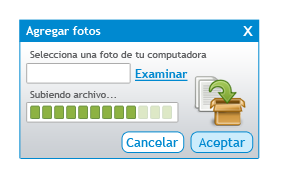
<style>
.page{position:relative;width:283px;height:182px;background:#ffffff}
.page>*{position:absolute;margin:0}
.t1{font:12px "TrebuchetMS-Bold";color:#ffffff}
.t2{font:20px "TrebuchetMS";color:#ffffff}
.t3{font:10px "TrebuchetMS";color:#626365}
.t4{font:12px "TrebuchetMS-Bold";color:#0089d0;text-decoration:underline}
.t5{font:13.3px "TrebuchetMS";color:#0089d0}
</style>
<div class="page">
<p class="t1" style="left:26px;top:26px;width:75px;height:11px">Agregar fotos</p>
<p class="t2" style="left:243px;top:26px;width:10px;height:10px">x</p>
<p class="t3" style="left:30px;top:51px;width:177px;height:9px">Selecciona una foto de tu computadora</p>
<p class="t4" style="left:135px;top:69px;width:53px;height:12px">Examinar</p>
<p class="t3" style="left:30px;top:91px;width:86px;height:7px">Subiendo archivo...</p>
<p class="t5" style="left:126px;top:137px;width:53px;height:10px">Cancelar</p>
<p class="t5" style="left:198px;top:138px;width:48px;height:12px">Aceptar</p>
</div>
